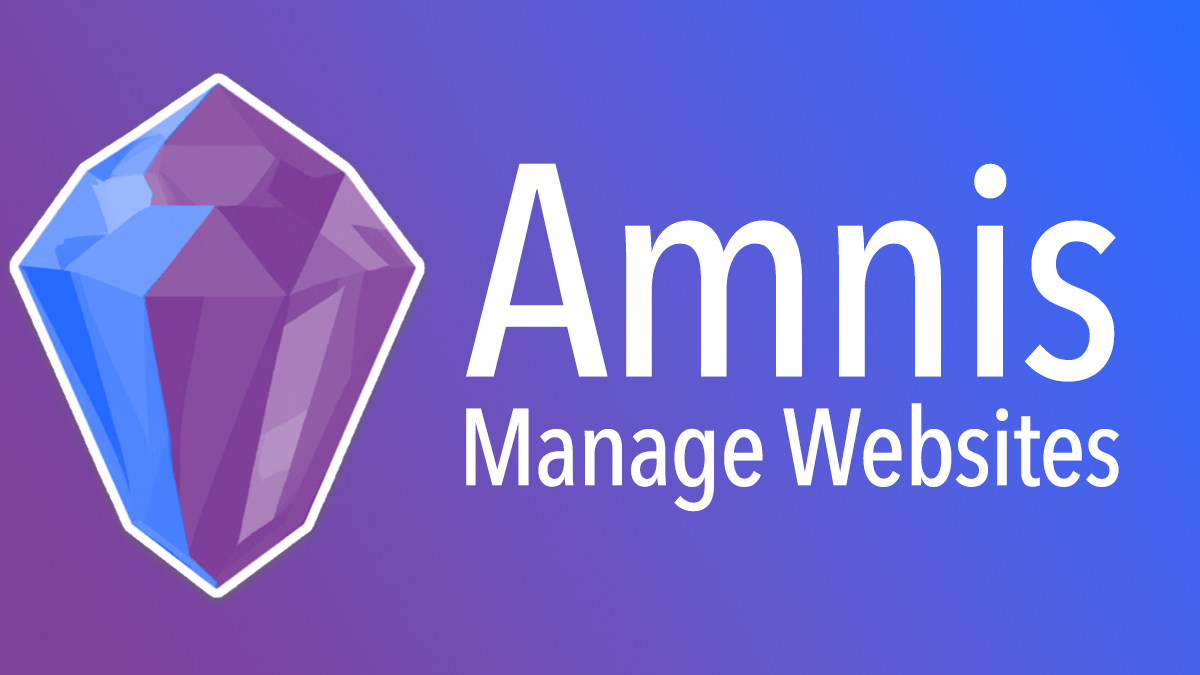
<style>
.page{position:relative;width:1200px;height:675px}
.page>*{position:absolute;margin:0}
.t1{font:300px "AvenirNextCondensed-Medium";letter-spacing:-0.02em;color:#ffffff}
.t2{font:108px "AvenirNextCondensed-Medium";letter-spacing:-0.02em;color:#ffffff}
</style>
<div class="page">
<p class="t1" style="left:466px;top:163px;width:650px;height:219px">Amnis</p>
<p class="t2" style="left:466px;top:403px;width:653px;height:109px">Manage Websites</p>
</div>
